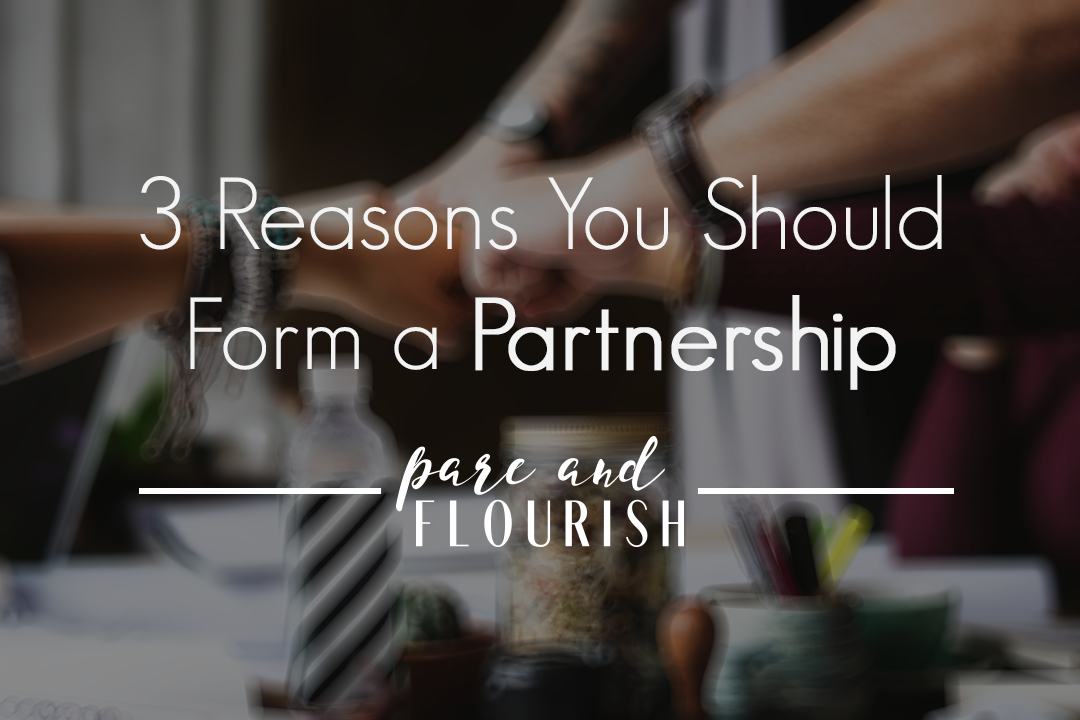
<style>
.page{position:relative;width:1080px;height:720px}
.page>*{position:absolute;margin:0}
.t1{font:100px "GeosansLight";color:#f3f3f3}
.t2{font:100px "GeosansLight";color:#f3f3f3;font-weight:bold}
</style>
<div class="page">
<p class="t1" style="left:140px;top:175px;width:802px;height:215px;text-align:center">3 Reasons You Should Form a <span class="t2">Partnership</span></p>
</div>
